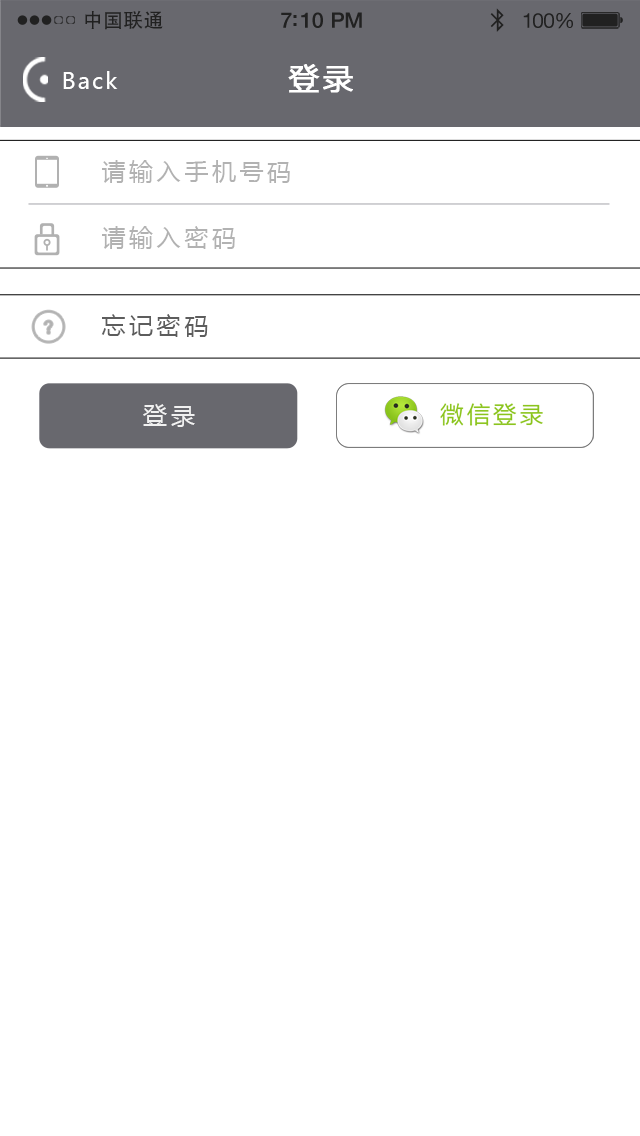
<style>
.page{position:relative;width:640px;height:1136px;background:#ffffff}
.page>*{position:absolute;margin:0}
.t1{font:19.7px "AdobeHeitiStd-Regular";letter-spacing:0.02em;color:#212121}
.t2{font:21.4px "HelveticaNeue-Medium";letter-spacing:-0.02em;color:#212121}
.t3{font:20.6px "HelveticaNeue";letter-spacing:-0.02em;color:#212121}
.t4{font:30px "MicrosoftYaHei";letter-spacing:0.1em;color:#ffffff;font-weight:bold}
.t5{font:22px "MicrosoftYaHei";letter-spacing:0.1em;color:#ffffff}
.t6{font:24px "MicrosoftYaHei";letter-spacing:0.15em;color:#b2b2b2}
.t7{font:24px "MicrosoftYaHei";letter-spacing:0.15em;color:#5d5d5d}
.t8{font:24px "MicrosoftYaHei";letter-spacing:0.15em;color:#f1f1f1}
</style>
<div class="page">
<p class="t1" style="left:85px;top:10px;width:78px;height:20px">中国联通</p>
<p class="t2" style="left:281px;top:12px;width:81px;height:16px">7:10 PM</p>
<p class="t3" style="left:523px;top:13px;width:50px;height:16px">100%</p>
<p class="t4" style="left:288px;top:64px;width:65px;height:29px">登录</p>
<p class="t5" style="left:63px;top:71px;width:55px;height:18px">Back</p>
<p class="t6" style="left:102px;top:160px;width:188px;height:23px">请输入手机号码</p>
<p class="t6" style="left:102px;top:226px;width:133px;height:23px">请输入密码</p>
<p class="t7" style="left:101px;top:314px;width:107px;height:23px">忘记密码</p>
<p class="t8" style="left:143px;top:404px;width:52px;height:23px">登录</p>
</div>
